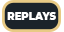
<style>
.page{position:relative;width:64px;height:32px;background:#1b232a}
.page>*{position:absolute;margin:0}
.t1{font:10px "Montserrat-Black";color:#ffffff}
</style>
<div class="page">
<p class="t1" style="left:7px;top:12px;width:49px;height:8px">REPLAYS</p>
</div>
